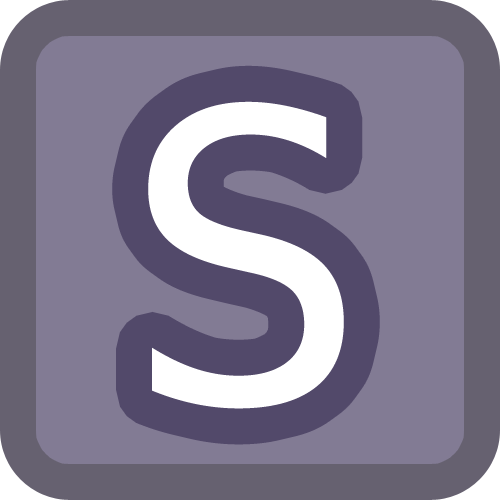
<style>
.page{position:relative;width:500px;height:500px;background:#827b94}
.page>*{position:absolute;margin:0}
.t1{font:405px "Menlo-Regular";color:#ffffff;scale:1.03 1}
</style>
<div class="page">
<p class="t1" style="left:148px;top:101px;width:196px;height:308px">S</p>
</div>
